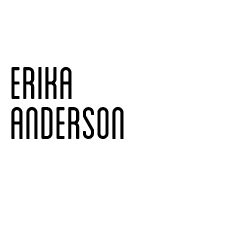
<style>
.page{position:relative;width:233px;height:233px;background:#ffffff}
.page>*{position:absolute;margin:0}
.t1{font:48px/40px "Blanch-Condensed";color:#000000}
</style>
<div class="page">
<p class="t1" style="left:11px;top:67px;width:113px;height:72px">erika <br>anderson</p>
</div>
